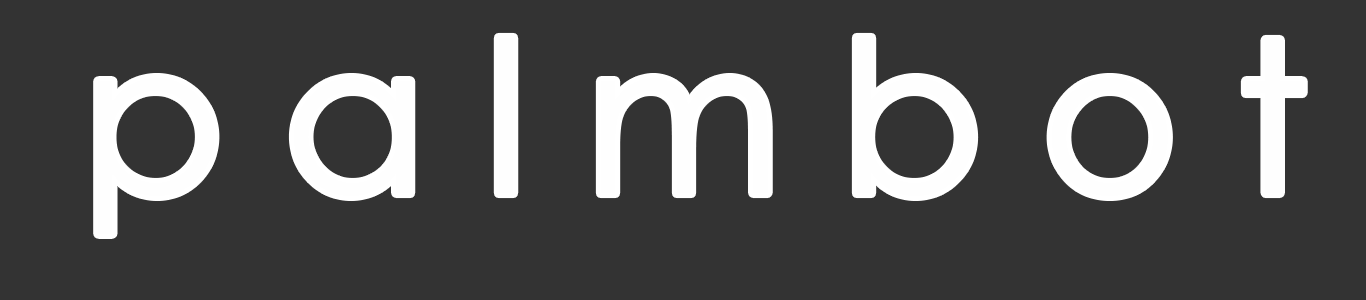
<style>
.page{position:relative;width:1366px;height:300px;background:#333333}
.page>*{position:absolute;margin:0}
.t1{font:210px "CenturyGothic";color:#fefefe}
</style>
<div class="page">
<p class="t1" style="left:98px;top:37px;width:1205px;height:197px">p a l m b o t</p>
</div>
